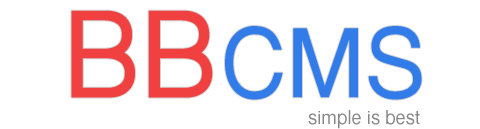
<style>
.page{position:relative;width:480px;height:129px;background:#ffffff}
.page>*{position:absolute;margin:0}
.t1{font:118.7px "SansSerif";color:#f14040;scale:0.96 1}
.t2{font:94.8px "SansSerif";color:#327cea;scale:0.96 1}
.t3{font:19.1px "SansSerif";color:#878787;scale:0.96 1}
</style>
<div class="page">
<p class="t1" style="left:71px;top:10px;width:142px;height:88px">BB</p>
<p class="t2" style="left:225px;top:26px;width:197px;height:74px">CMS</p>
<p class="t3" style="left:308px;top:110px;width:112px;height:19px">simple is best</p>
</div>
